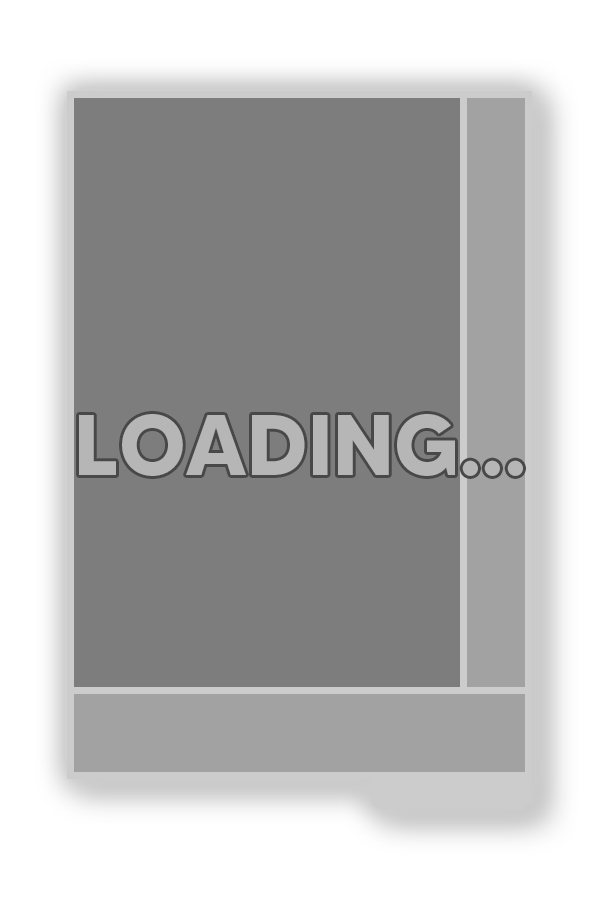
<style>
.page{position:relative;width:600px;height:900px;background:#7d7d7d}
.page>*{position:absolute;margin:0}
.t1{font:85.2px "MADETOMMY-Bold";color:#b6b6b6}
</style>
<div class="page">
<p class="t1" style="left:79px;top:414px;width:444px;height:62px">LOADING...</p>
</div>
